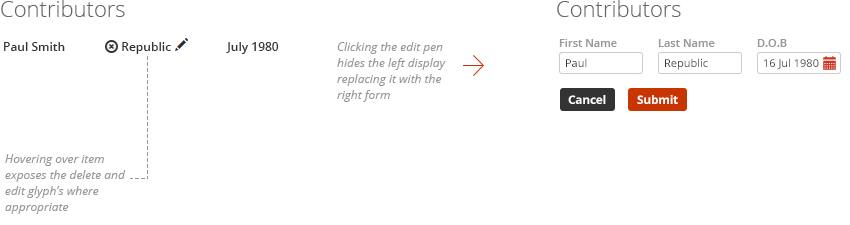
<style>
.page{position:relative;width:850px;height:225px;background:#ffffff}
.page>*{position:absolute;margin:0}
.t1{font:22px "OpenSans-Light";color:#666666}
.t2{font:11px "OpenSans-Semibold";color:#999999}
.t3{font:12px "OpenSans-Semibold";color:#333333}
.t4{font:12px/16px "OpenSans-Italic";color:#999999}
.t5{font:11px "OpenSans";color:#333333}
.t6{font:12px "OpenSans-Bold";letter-spacing:-0.025em;color:#ffffff}
</style>
<div class="page">
<p class="t1" style="left:1px;top:0px;width:124px;height:17px">Contributors</p>
<p class="t1" style="left:557px;top:0px;width:124px;height:17px">Contributors</p>
<p class="t2" style="left:559px;top:39px;width:58px;height:8px">First Name</p>
<p class="t2" style="left:658px;top:39px;width:57px;height:8px">Last Name</p>
<p class="t2" style="left:757px;top:39px;width:30px;height:8px">D.O.B</p>
<p class="t3" style="left:4px;top:42px;width:275px;height:12px">Paul Smith                  Republic                  July 1980</p>
<p class="t4" style="left:337px;top:42px;width:109px;height:60px">Clicking the edit pen <br>hides the left display<br>replacing it with the <br>right form</p>
<p class="t5" style="left:566px;top:58px;width:21px;height:9px">Paul</p>
<p class="t5" style="left:665px;top:58px;width:43px;height:12px">Republic</p>
<p class="t5" style="left:764px;top:58px;width:55px;height:11px">16 Jul 1980</p>
<p class="t6" style="left:568px;top:95px;width:38px;height:9px">Cancel</p>
<p class="t6" style="left:637px;top:95px;width:41px;height:9px">Submit</p>
<p class="t4" style="left:5px;top:154px;width:121px;height:60px">Hovering over item<br>exposes the delete and <br>edit glyph’s where<br>appropriate</p>
</div>
